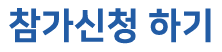
<style>
.page{position:relative;width:222px;height:52px;background:#ffffff}
.page>*{position:absolute;margin:0}
.t1{font:36px "NanumSquareEB";color:#225ca5}
</style>
<div class="page">
<p class="t1" style="left:9px;top:8px;width:202px;height:36px">참가신청 하기</p>
</div>
